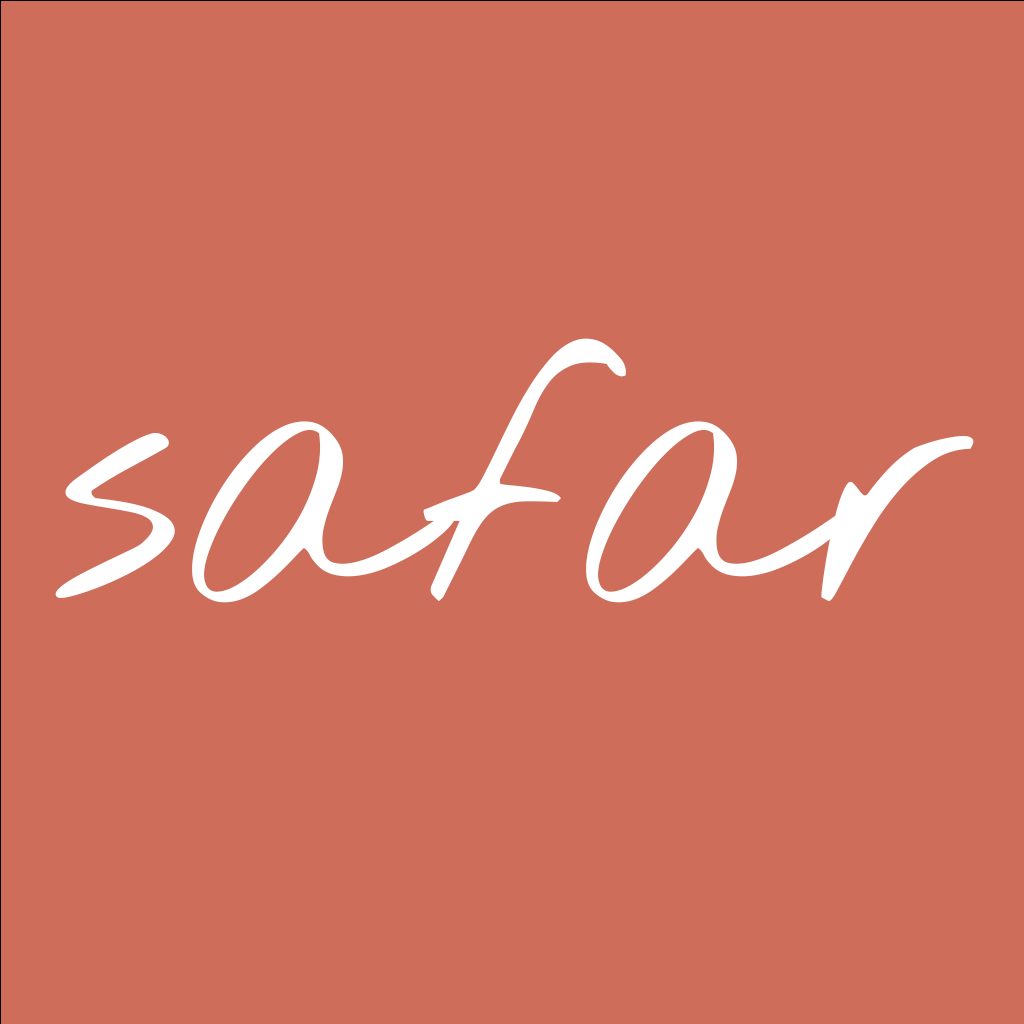
<style>
.page{position:relative;width:1024px;height:1024px;background:#ce6d59}
.page>*{position:absolute;margin:0}
.t1{font:344.6px "NothingYouCouldDo";color:#ffffff}
</style>
<div class="page">
<p class="t1" style="left:55px;top:338px;width:919px;height:265px">safar</p>
</div>
